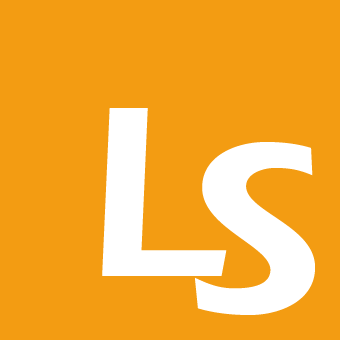
<style>
.page{position:relative;width:340px;height:340px;background:#f39c12}
.page>*{position:absolute;margin:0}
.t1{font:251px "ACIST-Bold";color:#ffffff}
</style>
<div class="page">
<p class="t1" style="left:102px;top:108px;width:125px;height:168px">L</p>
<p class="t1" style="left:195px;top:142px;width:120px;height:173px">S</p>
</div>
